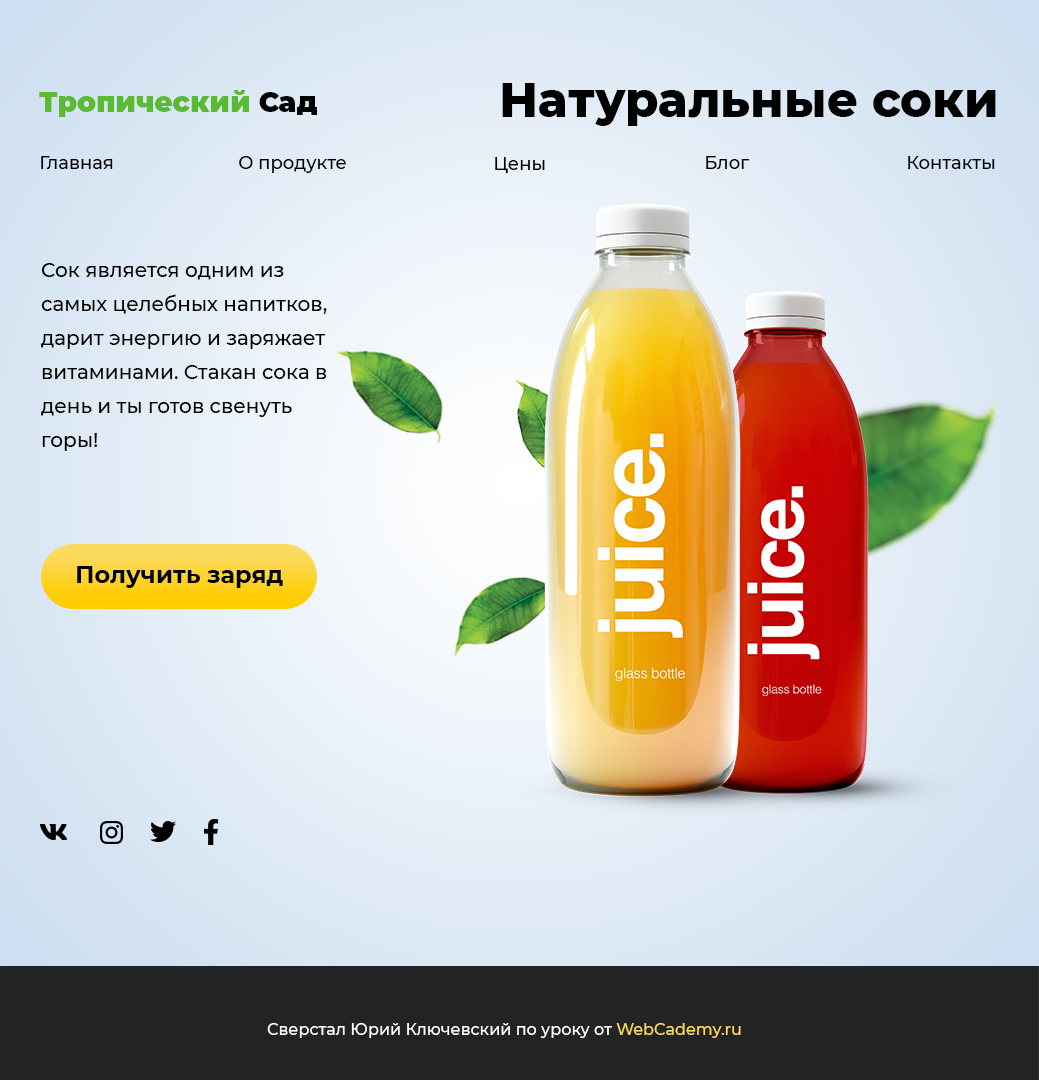
<style>
.page{position:relative;width:1039px;height:1080px}
.page>*{position:absolute;margin:0}
.t1{font:48px "Montserrat-ExtraBold";color:#000000}
.t2{font:28px "Montserrat-Black";color:#5abb33}
.t3{font:28px "Montserrat-Black";color:#000000}
.t4{font:18px "Montserrat-Medium";color:#000000}
.t5{font:20px/34px "Montserrat-Medium";color:#000000}
.t6{font:24px "Montserrat-Bold";color:#000000}
.t7{font:16px "Montserrat-Medium";color:#ffffff}
.t8{font:16px "Montserrat-Medium";color:#fada5a}
</style>
<div class="page">
<p class="t1" style="left:502px;top:83px;width:494px;height:43px">Натуральные соки</p>
<p class="t2" style="left:39px;top:90px;width:278px;height:27px">Тропический<span class="t3"> Сад</span></p>
<p class="t4" style="left:41px;top:156px;width:72px;height:13px">Главная</p>
<p class="t4" style="left:239px;top:156px;width:107px;height:17px">О продукте</p>
<p class="t4" style="left:495px;top:157px;width:50px;height:16px">Цены</p>
<p class="t4" style="left:706px;top:156px;width:44px;height:13px">Блог</p>
<p class="t4" style="left:908px;top:156px;width:87px;height:13px">Контакты</p>
<p class="t5" style="left:41px;top:263px;width:286px;height:188px">Cок является одним из самых целебных напитков, дарит энергию и заряжает витаминами. Стакан сока в день и ты готов свенуть горы!</p>
<p class="t6" style="left:77px;top:566px;width:206px;height:22px">Получить заряд</p>
<p class="t7" style="left:267px;top:1023px;width:474px;height:15px">Сверстал Юрий Ключевский по уроку от <span class="t8">WebCademy.ru</span></p>
</div>
